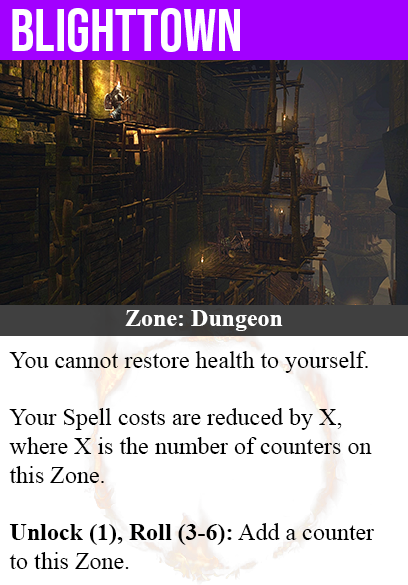
<style>
.page{position:relative;width:408px;height:585px;background:#ffffff}
.page>*{position:absolute;margin:0}
.t1{font:60px "BebasNeue-Regular";color:#ffffff}
.t2{font:24px "TimesNewRomanPS-BoldMT";color:#ffffff}
.t3{font:24px "TimesNewRomanPSMT";color:#000000}
.t4{font:24px "TimesNewRomanPS-BoldMT";color:#000000}
</style>
<div class="page">
<p class="t1" style="left:12px;top:8px;width:228px;height:44px">blighttown</p>
<p class="t2" style="left:125px;top:310px;width:158px;height:21px">Zone: Dungeon</p>
<p class="t3" style="left:9px;top:351px;width:365px;height:218px">You cannot restore health to yourself.<br><br>Your Spell costs are reduced by X,<br>where X is the number of counters on<br>this Zone.<br><br><span class="t4">Unlock (1), Roll (3-6):</span> Add a counter<br>to this Zone.</p>
</div>
